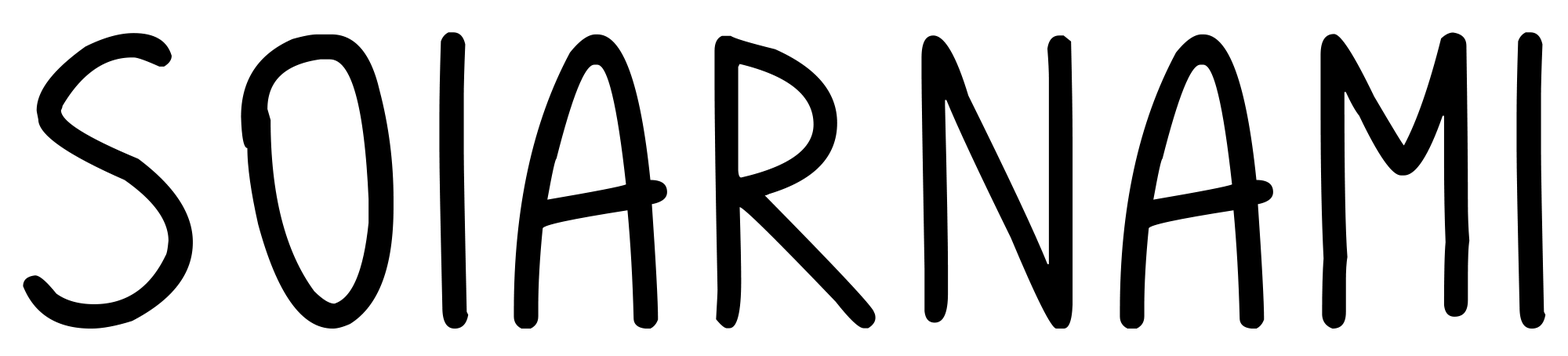
<style>
.page{position:relative;width:1568px;height:356px;background:#ffffff}
.page>*{position:absolute;margin:0}
.t1{font:380.2px "soiarnamisfont";letter-spacing:0.075em;color:#000000}
</style>
<div class="page">
<p class="t1" style="left:23px;top:32px;width:1523px;height:296px">SOIARNAMI</p>
</div>
